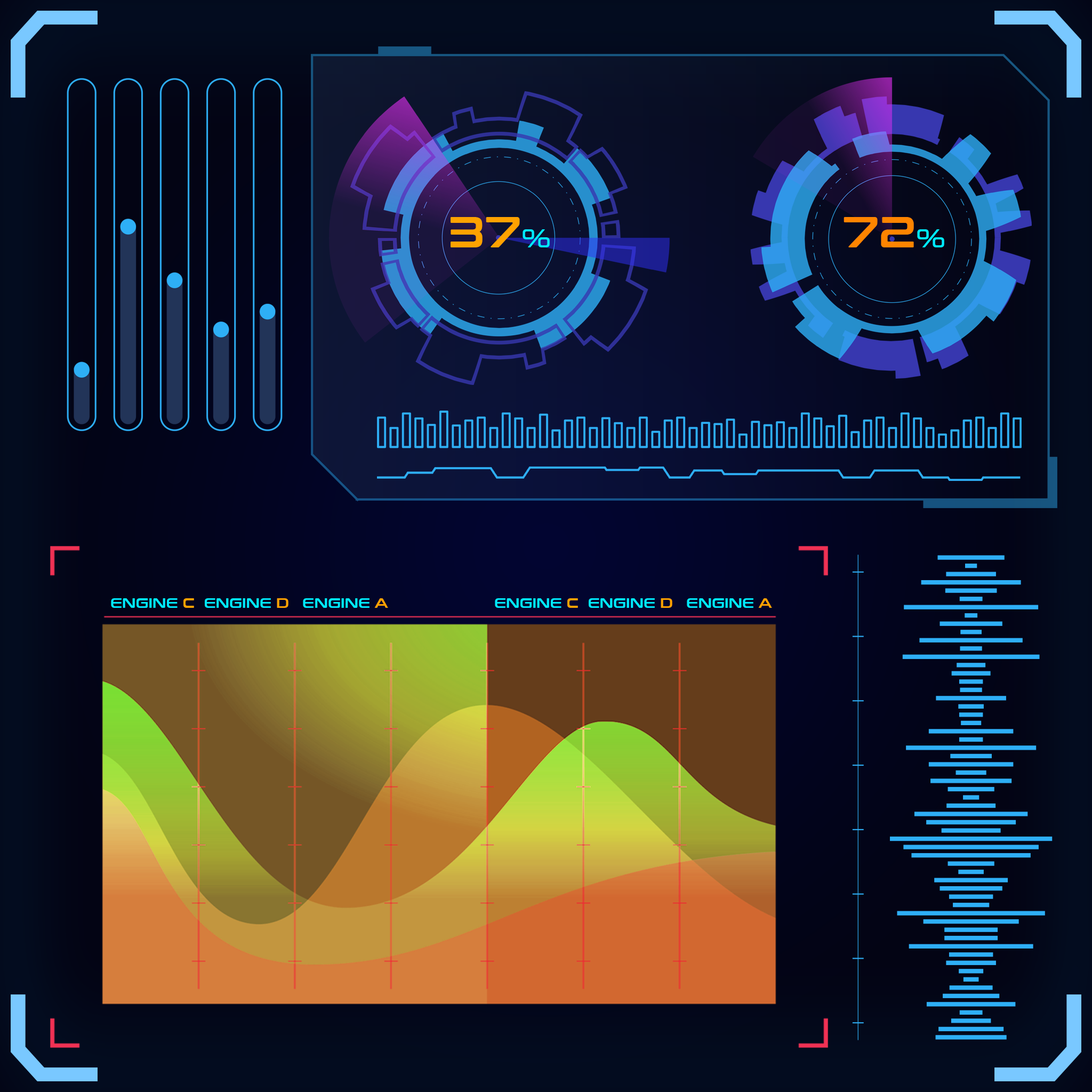
<style>
.page{position:relative;width:1092px;height:1092px}
.page>*{position:absolute;margin:0}
.t1{font:43.4px "ConthraxSb-Regular";color:#ffa200}
.t2{font:26.3px "ConthraxSb-Regular";color:#00eaff}
.t3{font:43.4px "ConthraxSb-Regular";color:#ff8400}
.t4{font:13.9px "ConthraxSb-Regular";color:#00eaff}
.t5{font:13.9px "ConthraxSb-Regular";color:#ffa200}
</style>
<div class="page">
<p class="t1" style="left:451px;top:217px;width:99px;height:30px">37<span class="t2">%</span></p>
<p class="t3" style="left:844px;top:217px;width:100px;height:30px">72<span class="t2">%</span></p>
<p class="t4" style="left:111px;top:598px;width:83px;height:10px">ENGINE <span class="t5">C</span></p>
<p class="t4" style="left:205px;top:598px;width:83px;height:10px">ENGINE <span class="t5">D</span></p>
<p class="t4" style="left:303px;top:598px;width:85px;height:10px">ENGINE <span class="t5">A</span></p>
<p class="t4" style="left:495px;top:598px;width:83px;height:10px">ENGINE <span class="t5">C</span></p>
<p class="t4" style="left:589px;top:598px;width:83px;height:10px">ENGINE <span class="t5">D</span></p>
<p class="t4" style="left:687px;top:598px;width:85px;height:10px">ENGINE <span class="t5">A</span></p>
</div>
